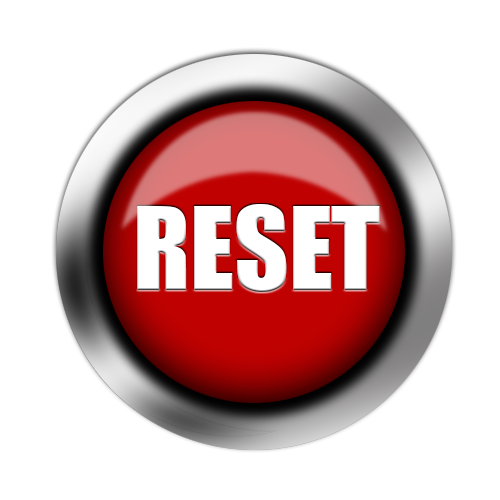
<style>
.page{position:relative;width:500px;height:500px;background:#ffffff}
.page>*{position:absolute;margin:0}
.t1{font:105.6px "Impact";color:#ffffff}
</style>
<div class="page">
<p class="t1" style="left:137px;top:204px;width:243px;height:88px">RESET</p>
</div>
